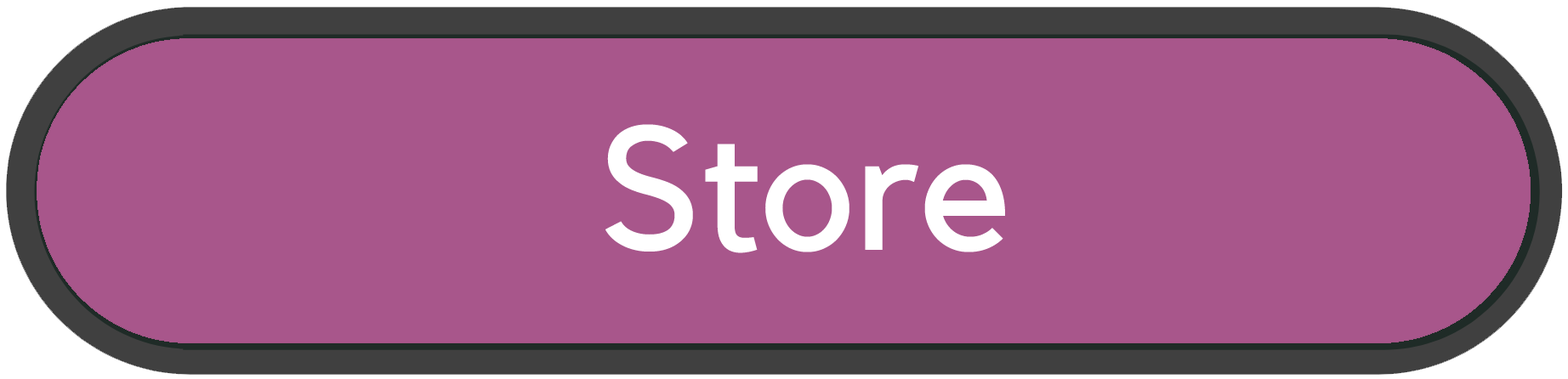
<style>
.page{position:relative;width:1568px;height:379px;background:#a8568b}
.page>*{position:absolute;margin:0}
.t1{font:174.6px "Kollektif";color:#ffffff}
</style>
<div class="page">
<p class="t1" style="left:605px;top:124px;width:400px;height:129px">Store</p>
</div>
